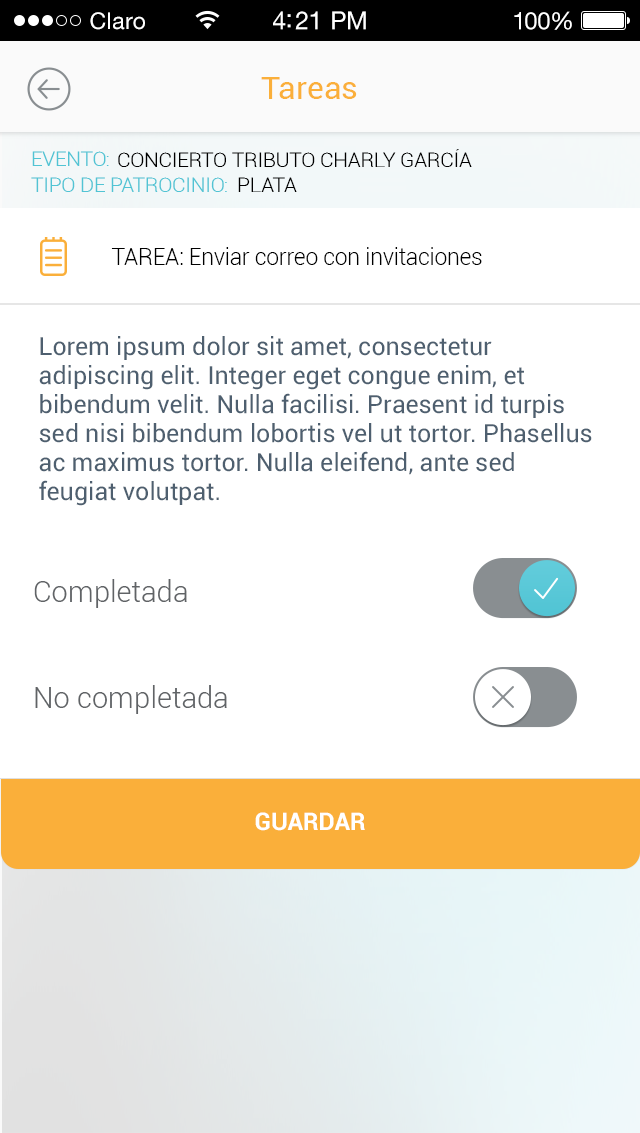
<style>
.page{position:relative;width:640px;height:1133px;background:#ffffff}
.page>*{position:absolute;margin:0}
.t1{font:23px "HelveticaNeueLTStd-Roman";letter-spacing:0.02em;color:#ffffff}
.t2{font:25px "HelveticaNeueLTStd-Roman";letter-spacing:-0.02em;color:#ffffff}
.t3{font:24px "HelveticaNeueLTStd-Roman";letter-spacing:-0.02em;color:#ffffff}
.t4{font:32px "Roboto-Regular";color:#faaf3a}
.t5{font:20.4px "Roboto-Light";letter-spacing:-0.01em;color:#000000}
.t6{font:20.4px "Roboto-Light";letter-spacing:-0.01em;color:#51c4d4}
.t7{font:22.9px "Roboto-Light";letter-spacing:-0.01em;color:#000000}
.t8{font:25px/29.2px "Roboto-Regular";color:#4e5f6f}
.t9{font:29.2px "Roboto-Light";color:#606366}
.t10{font:24.1px "Roboto-Bold";color:#ffffff}
</style>
<div class="page">
<p class="t1" style="left:90px;top:12px;width:55px;height:18px">Claro</p>
<p class="t2" style="left:273px;top:11px;width:93px;height:19px">4:21 PM</p>
<p class="t3" style="left:514px;top:11px;width:58px;height:19px">100%</p>
<p class="t4" style="left:261px;top:77px;width:96px;height:22px">Tareas</p>
<p class="t5" style="left:118px;top:149px;width:354px;height:18px">CONCIERTO TRIBUTO CHARLY GARCÍA</p>
<p class="t6" style="left:32px;top:151px;width:77px;height:15px">EVENTO:</p>
<p class="t6" style="left:31px;top:177px;width:196px;height:15px">TIPO DE PATROCINIO:</p>
<p class="t5" style="left:238px;top:177px;width:59px;height:15px">PLATA</p>
<p class="t7" style="left:111px;top:247px;width:371px;height:18px">TAREA: Enviar correo con invitaciones</p>
<p class="t8" style="left:39px;top:336px;width:553px;height:170px">Lorem ipsum dolor sit amet, consectetur adipiscing elit. Integer eget congue enim, et bibendum velit. Nulla facilisi. Praesent id turpis sed nisi bibendum lobortis vel ut tortor. Phasellus ac maximus tortor. Nulla eleifend, ante sed feugiat volutpat.</p>
<p class="t9" style="left:34px;top:579px;width:153px;height:29px">Completada</p>
<p class="t9" style="left:35px;top:685px;width:192px;height:29px">No completada</p>
<p class="t10" style="left:255px;top:812px;width:110px;height:19px">GUARDAR</p>
</div>
